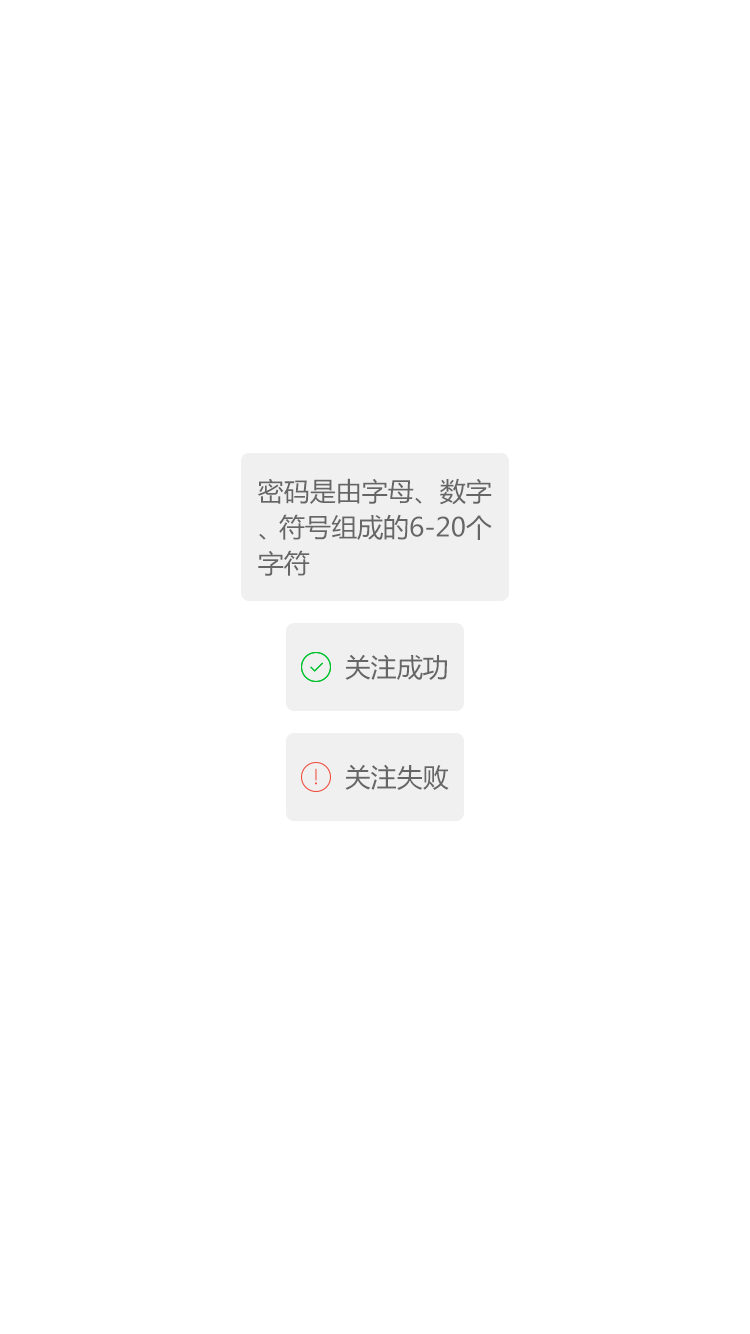
<style>
.page{position:relative;width:750px;height:1334px;background:#ffffff}
.page>*{position:absolute;margin:0}
.t1{font:26px/36px "MicrosoftYaHei";color:#666666}
.t2{font:26px "MicrosoftYaHei";color:#666666}
</style>
<div class="page">
<p class="t1" style="left:258px;top:478px;width:234px;height:98px">密码是由字母、数字<br>、符号组成的6-20个<br>字符</p>
<p class="t2" style="left:345px;top:654px;width:102px;height:26px">关注成功</p>
<p class="t2" style="left:345px;top:764px;width:104px;height:26px">关注失败</p>
</div>
